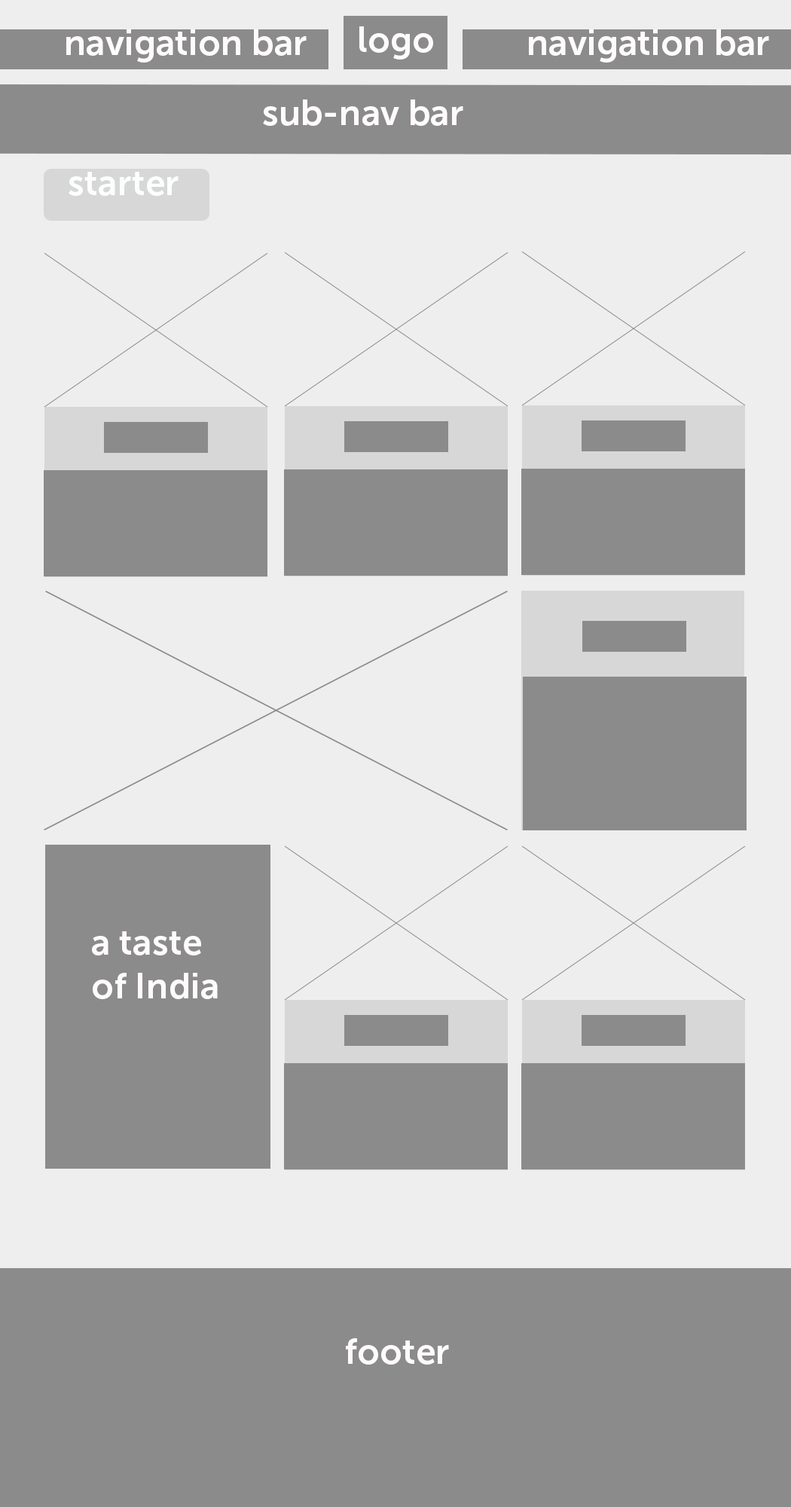
<style>
.page{position:relative;width:791px;height:1507px;background:#eeeeee}
.page>*{position:absolute;margin:0}
.t1{font:36.2px "MuseoSans-700";color:#fffbfb}
.t2{font:36.2px "MuseoSans-700";color:#fcfdfd}
</style>
<div class="page">
<p class="t1" style="left:66px;top:29px;width:241px;height:34px">navigation bar</p>
<p class="t1" style="left:359px;top:26px;width:74px;height:34px">logo</p>
<p class="t1" style="left:529px;top:29px;width:240px;height:34px">navigation bar</p>
<p class="t1" style="left:263px;top:99px;width:200px;height:27px">sub-nav bar</p>
<p class="t2" style="left:69px;top:172px;width:110px;height:24px">starter</p>
<p class="t1" style="left:92px;top:931px;width:126px;height:68px">a taste <br>of India</p>
<p class="t1" style="left:346px;top:1338px;width:103px;height:27px">footer</p>
</div>
